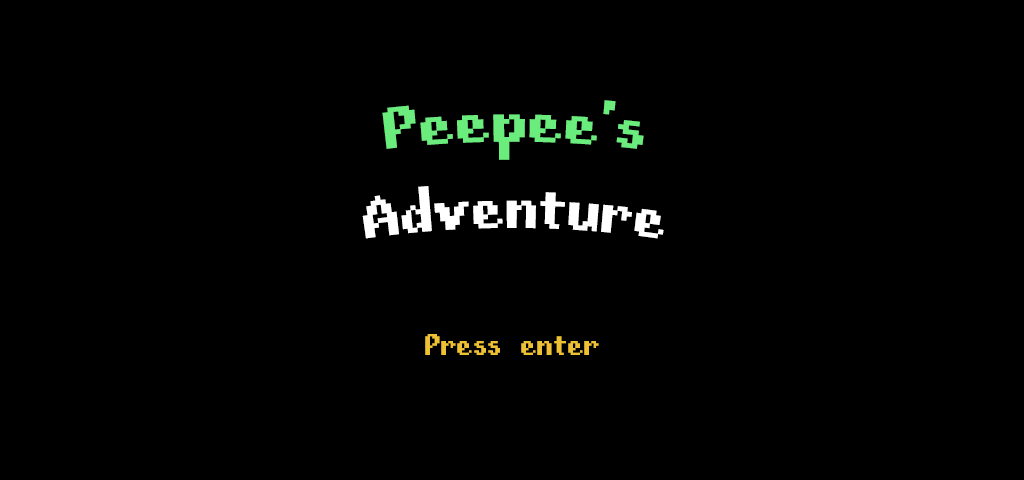
<style>
.page{position:relative;width:1024px;height:480px;background:#000000}
.page>*{position:absolute;margin:0}
.t1{font:71.9px "fibberish";color:#ffffff}
.t2{font:71.9px "fibberish";color:#6aed7c}
.t3{font:37.5px "fibberish";color:#eec033}
</style>
<div class="page">
<p class="t1" style="left:362px;top:100px;width:302px;height:139px;text-align:center"><span class="t2">Peepee's</span> Adventure</p>
<p class="t3" style="left:425px;top:334px;width:174px;height:21px">Press enter</p>
</div>
